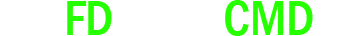
<style>
.page{position:relative;width:358px;height:36px;background:#ffffff}
.page>*{position:absolute;margin:0}
.t1{font:50.7px "FranklinGothic-MediumCond";color:#26ff00}
</style>
<div class="page">
<p class="t1" style="left:67px;top:1px;width:45px;height:34px">FD</p>
<p class="t1" style="left:225px;top:0px;width:88px;height:36px">CMD</p>
</div>
